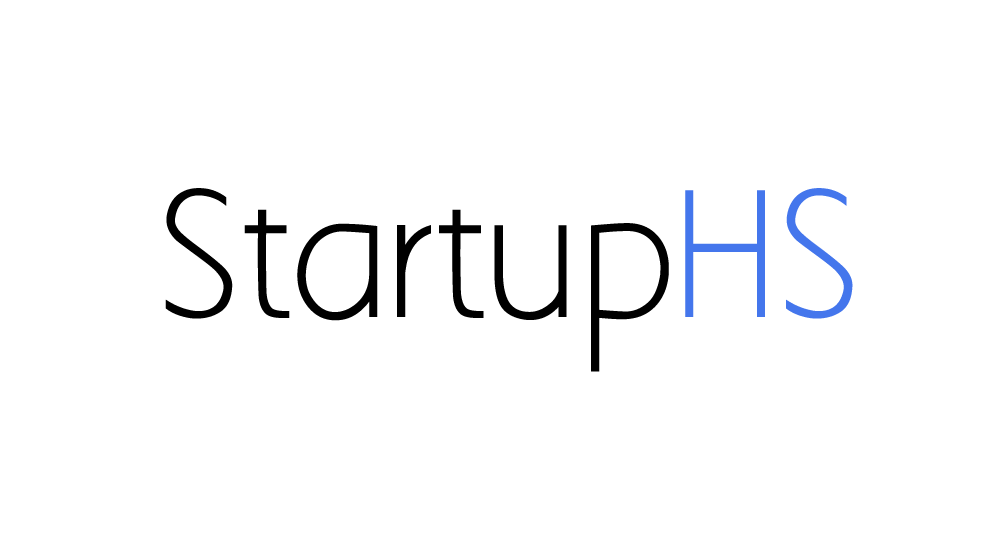
<style>
.page{position:relative;width:1000px;height:545px;background:#ffffff}
.page>*{position:absolute;margin:0}
.t1{font:158.6px "AaarghNormal";letter-spacing:-0.025em;color:#000000}
.t2{font:158.6px "AaarghNormal";letter-spacing:-0.025em;color:#4476ec}
</style>
<div class="page">
<p class="t1" style="left:165px;top:188px;width:504px;height:184px">Startup</p>
<p class="t2" style="left:685px;top:188px;width:168px;height:131px">HS</p>
</div>
